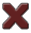
<style>
.page{position:relative;width:31px;height:33px;background:#ffffff}
.page>*{position:absolute;margin:0}
.t1{font:36px "BerlinSansFBDemi-Bold";color:#612121;scale:1.25 1}
</style>
<div class="page">
<p class="t1" style="left:3px;top:3px;width:25px;height:26px">X</p>
</div>
